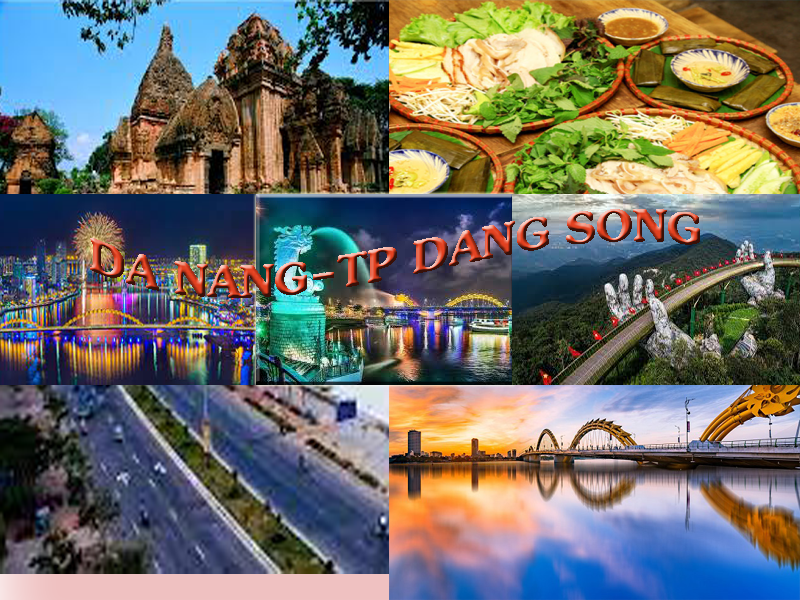
<style>
.page{position:relative;width:800px;height:600px}
.page>*{position:absolute;margin:0}
.t1{font:72px "JasmineUPCBold"}
</style>
<div class="page">
<p class="t1" style="left:90px;top:209px;width:610px;height:89px">DA NANG-TP DANG SONG</p>
</div>
